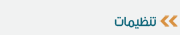
<style>
.page{position:relative;width:180px;height:35px;background:#f1f2f2}
.page>*{position:absolute;margin:0}
.t1{font:14px "Mj_Flow";letter-spacing:-0.001em;color:#0d6579}
</style>
<div class="page">
<p class="t1" style="left:114px;top:16px;width:42px;height:13px">تنظیمات</p>
</div>
